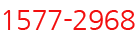
<style>
.page{position:relative;width:140px;height:38px;background:#ffffff}
.page>*{position:absolute;margin:0}
.t1{font:27.1px "NanumGothic";letter-spacing:-0.025em;color:#f20f0f}
</style>
<div class="page">
<p class="t1" style="left:3px;top:10px;width:132px;height:20px">1577-2968</p>
</div>
